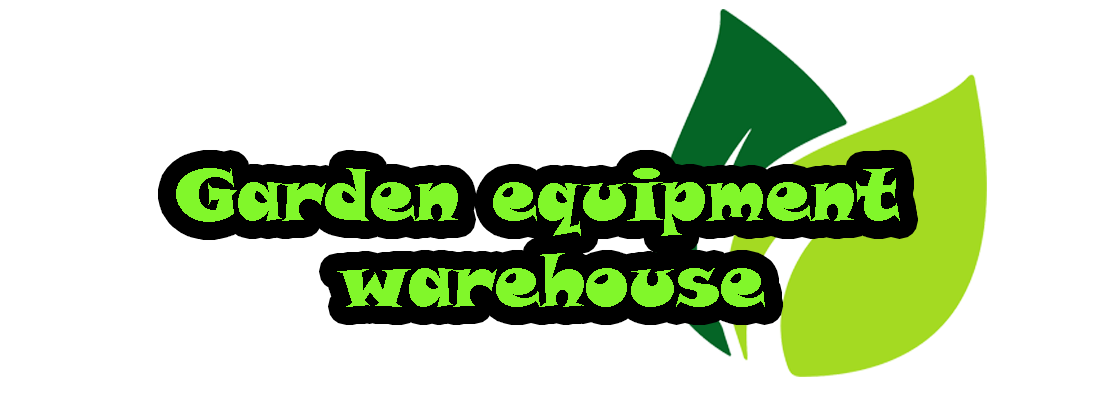
<style>
.page{position:relative;width:1100px;height:410px;background:#ffffff}
.page>*{position:absolute;margin:0}
.t1{font:72px "SnapITC-Regular";color:#81f72a}
</style>
<div class="page">
<p class="t1" style="left:176px;top:168px;width:724px;height:139px;text-align:center">Garden equipment<br> warehouse</p>
</div>
